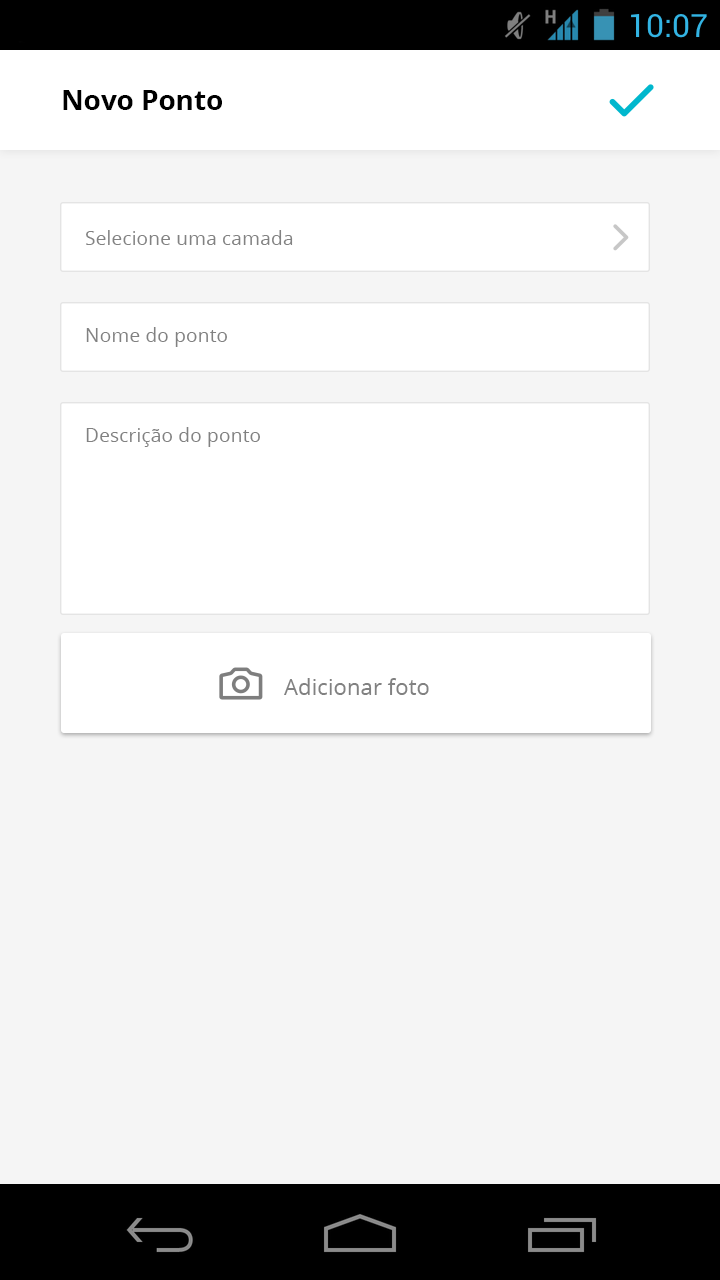
<style>
.page{position:relative;width:720px;height:1280px;background:#f5f5f5}
.page>*{position:absolute;margin:0}
.t1{font:27.8px "OpenSans-Bold";color:#000000}
.t2{font:19.4px "OpenSans";color:#828282}
.t3{font:19.4px "OpenSans";color:#818181}
.t4{font:22.2px "OpenSans";color:#818181}
</style>
<div class="page">
<p class="t1" style="left:63px;top:90px;width:159px;height:20px">Novo Ponto</p>
<p class="t2" style="left:86px;top:230px;width:207px;height:15px">Selecione uma camada</p>
<p class="t3" style="left:86px;top:327px;width:141px;height:20px">Nome do ponto</p>
<p class="t3" style="left:86px;top:427px;width:174px;height:20px">Descrição do ponto</p>
<p class="t4" style="left:284px;top:678px;width:145px;height:17px">Adicionar foto</p>
</div>
